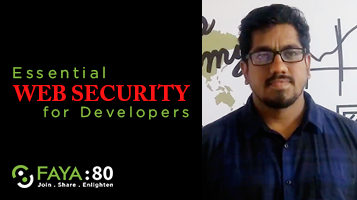
<style>
.page{position:relative;width:357px;height:200px;background:#000000}
.page>*{position:absolute;margin:0}
.t1{font:15.2px "Gotham-Book";letter-spacing:0.23em;color:#87c042}
.t2{font:22.1px "ACaslonPro-Bold";color:#fd1414;text-transform:uppercase}
.t3{font:22.1px "ACaslonPro-Bold";color:#87c042;text-transform:uppercase}
.t4{font:14.4px "Gotham-Book";letter-spacing:0.224em;color:#87c042}
</style>
<div class="page">
<p class="t1" style="left:13px;top:66px;width:92px;height:13px">Essential</p>
<p class="t2" style="left:12px;top:84px;width:178px;height:18px"><span class="t3"> <br></span>Web Security</p>
<p class="t4" style="left:43px;top:106px;width:146px;height:14px">for Developers</p>
</div>
